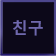
<style>
.page{position:relative;width:56px;height:56px;background:#0c0819}
.page>*{position:absolute;margin:0}
.t1{font:16px "MalgunGothicBold";color:#6f68ae}
</style>
<div class="page">
<p class="t1" style="left:13px;top:20px;width:30px;height:16px">친구</p>
</div>
